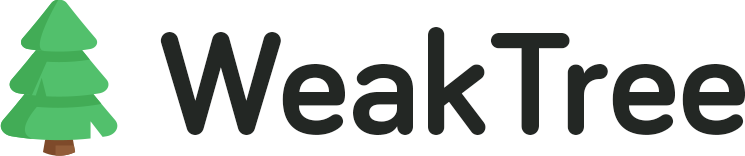
<style>
.page{position:relative;width:745px;height:156px;background:#ffffff}
.page>*{position:absolute;margin:0}
.t1{font:150px "Bariol-Bold";color:#232724}
</style>
<div class="page">
<p class="t1" style="left:160px;top:27px;width:585px;height:108px">WeakTree</p>
</div>
